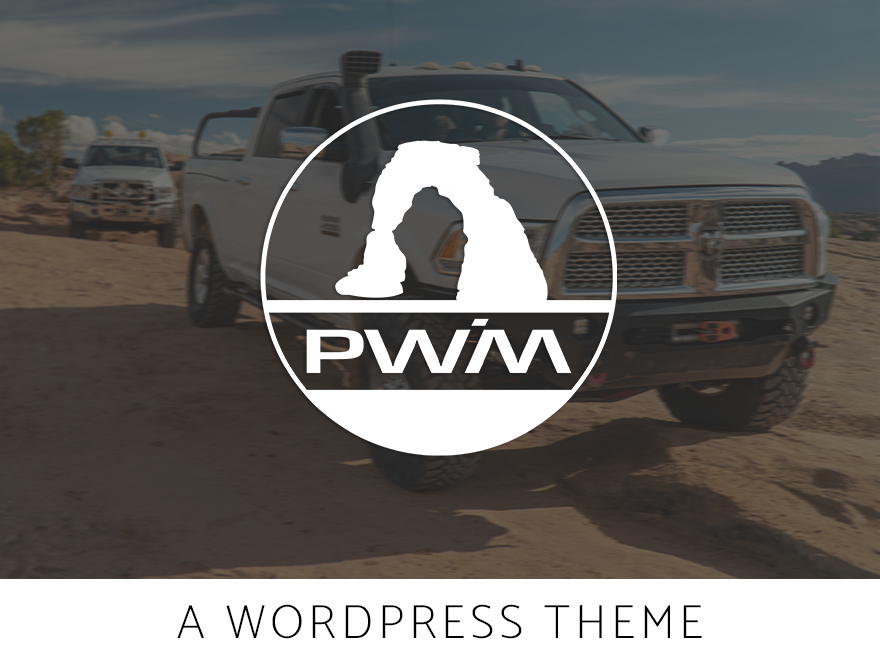
<style>
.page{position:relative;width:880px;height:660px}
.page>*{position:absolute;margin:0}
.t1{font:48.1px "Catamaran-Thin";letter-spacing:0.1em;color:#000000}
</style>
<div class="page">
<p class="t1" style="left:177px;top:604px;width:525px;height:35px">A WORDPRESS THEME</p>
</div>
